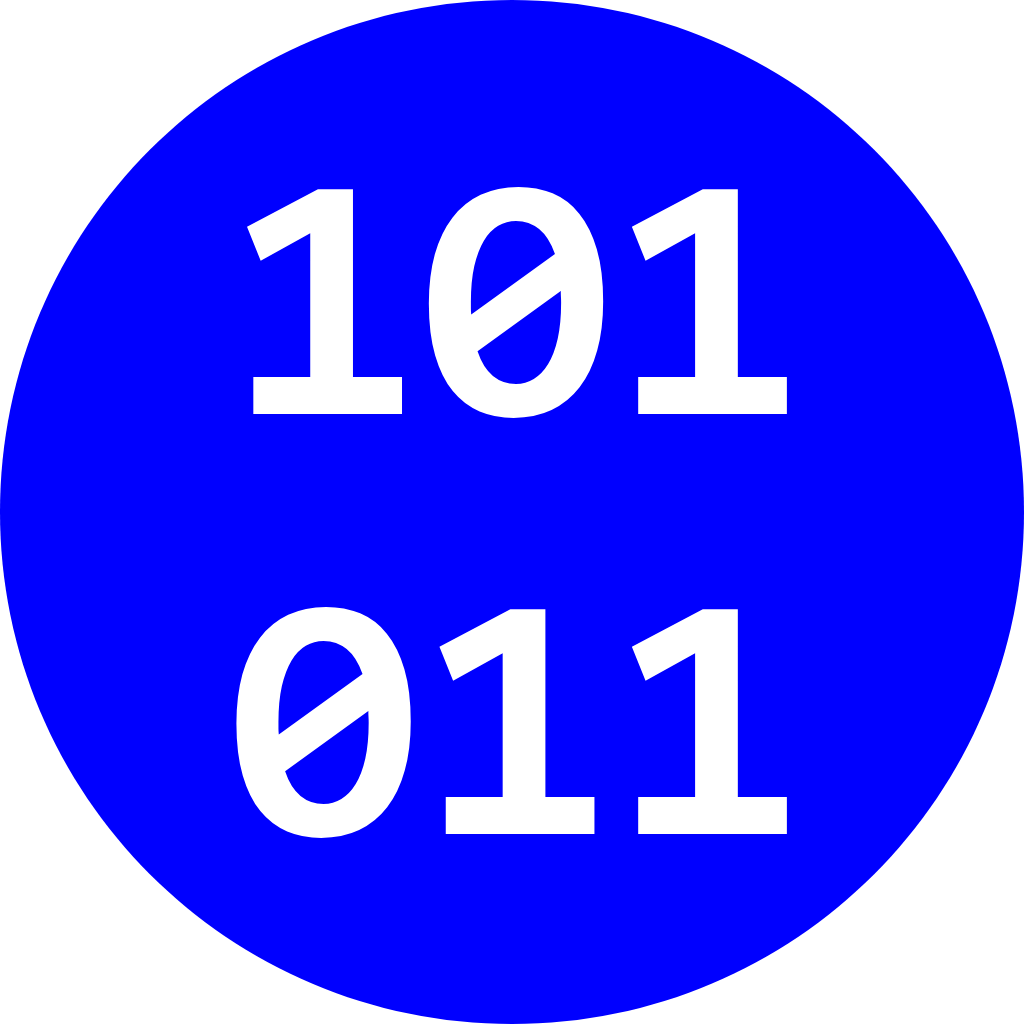
<style>
.page{position:relative;width:1024px;height:1024px;background:#0000ff}
.page>*{position:absolute;margin:0}
.t1{font:350px "Consolas-Bold";color:#ffffff}
</style>
<div class="page">
<p class="t1" style="left:236px;top:186px;width:551px;height:652px;text-align:center">101<br>011</p>
</div>
